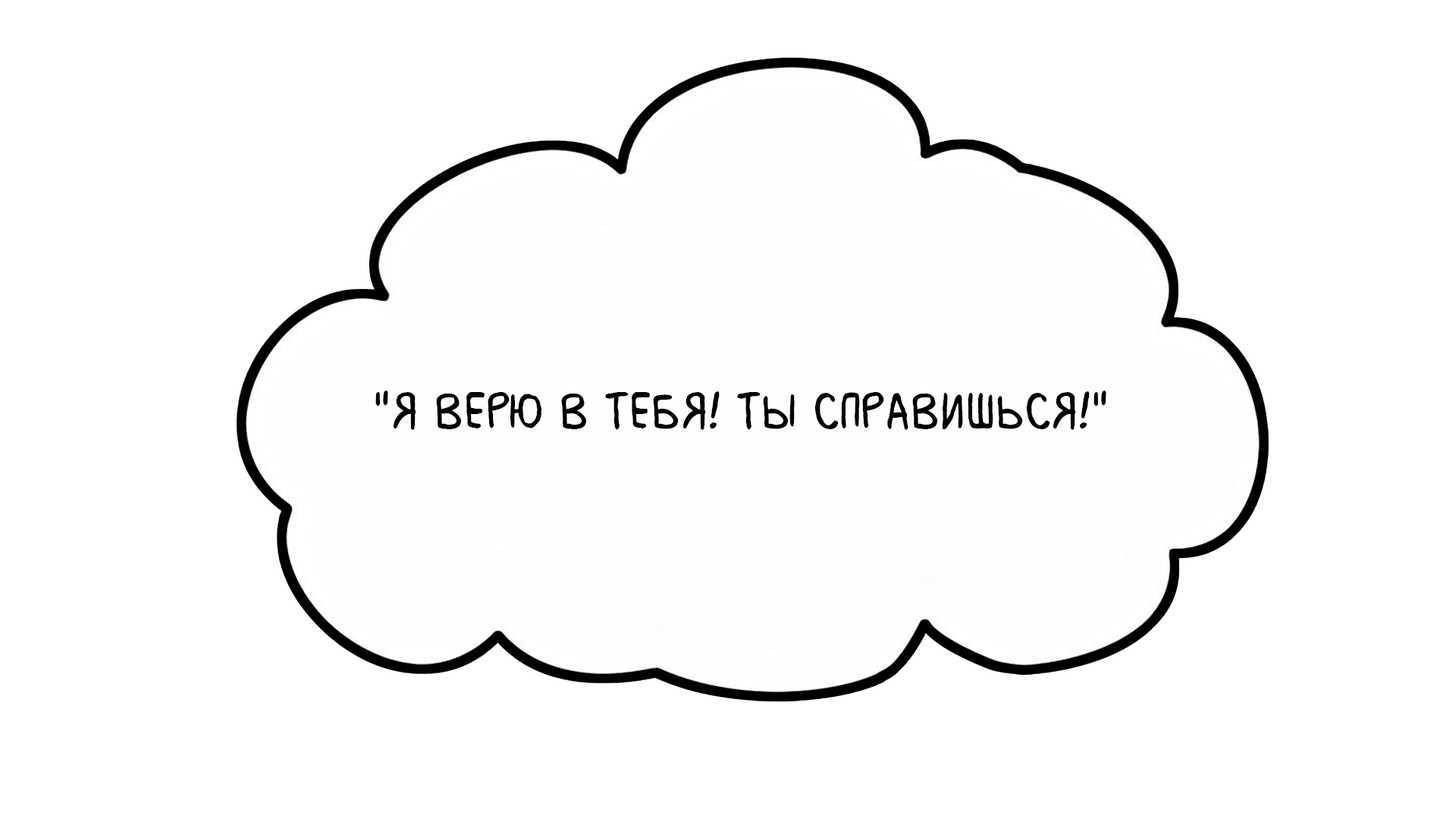
<style>
.page{position:relative;width:1456px;height:819px;background:#ffffff}
.page>*{position:absolute;margin:0}
.t1{font:54.6px "MilkMustacheBB";color:#000000}
</style>
<div class="page">
<p class="t1" style="left:375px;top:391px;width:731px;height:39px">"Я верю в тебя! Ты справишься!"</p>
</div>
